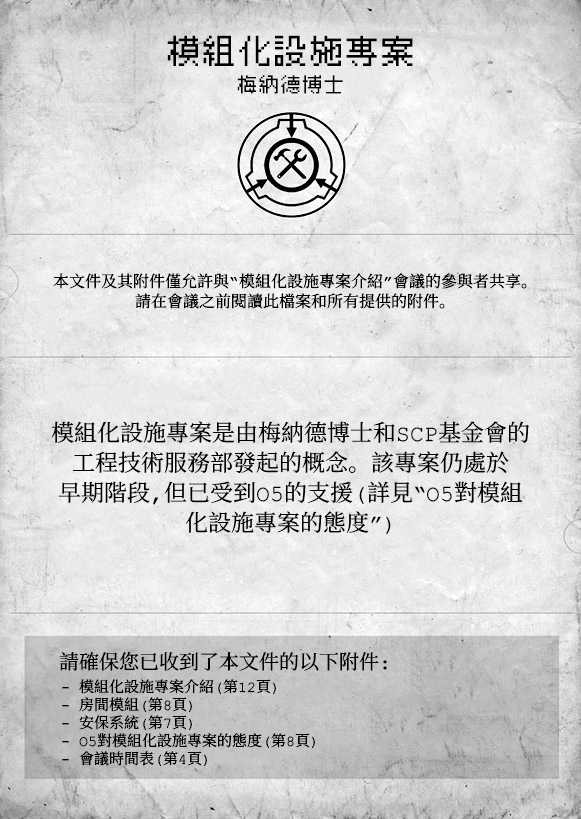
<style>
.page{position:relative;width:581px;height:819px}
.page>*{position:absolute;margin:0}
.t1{font:33px "Cubic_11";color:#000000}
.t2{font:20px "Cubic_11";color:#000000}
.t3{font:16px/10px "ContainmentBreach-Regular";color:#000000}
.t4{font:23px/30px "ContainmentBreach-Regular";color:#000000}
.t5{font:20px "ContainmentBreach-Regular";color:#000000}
.t6{font:15px/18px "ContainmentBreach-Regular";color:#000000}
</style>
<div class="page">
<p class="t1" style="left:167px;top:35px;width:246px;height:31px">模組化設施專案</p>
<p class="t2" style="left:237px;top:75px;width:106px;height:19px">梅納德博士</p>
<p class="t3" style="left:53px;top:273px;width:474px;height:36px;text-align:center">本文件及其附件僅允許與“模組化設施專案介紹”會議的參與者共享。<br><br>請在會議之前閱讀此檔案和所有提供的附件。</p>
<p class="t4" style="left:51px;top:421px;width:478px;height:113px;text-align:center">模組化設施專案是由梅納德博士和SCP基金會的<br>工程技術服務部發起的概念。該專案仍處於<br>早期階段，但已受到O5的支援（詳見“O5對模組<br>化設施專案的態度”）</p>
<p class="t5" style="left:59px;top:652px;width:328px;height:19px">請確保您已收到了本文件的以下附件：</p>
<p class="t6" style="left:62px;top:679px;width:253px;height:87px">- 模組化設施專案介紹（第12頁）<br>- 房間模組（第8頁）<br>- 安保系統（第7頁）<br>- O5對模組化設施專案的態度（第8頁）<br>- 會議時間表（第4頁）</p>
</div>
